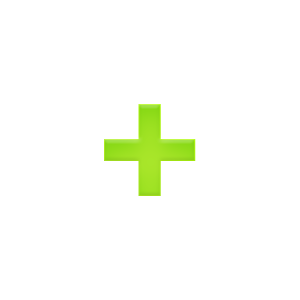
<style>
.page{position:relative;width:300px;height:300px;background:#ffffff}
.page>*{position:absolute;margin:0}
.t1{font:172px "Helvetica-Bold";letter-spacing:0.02em;color:#ace72c}
</style>
<div class="page">
<p class="t1" style="left:104px;top:104px;width:92px;height:92px">+</p>
</div>
